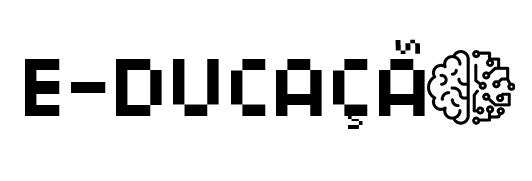
<style>
.page{position:relative;width:532px;height:181px;background:#ffffff}
.page>*{position:absolute;margin:0}
.t1{font:38.6px "04b03";color:#000000;scale:0.73 1}
.t2{font:91.3px "04b03";color:#000000}
.t3{font:28.9px "04b03";color:#000000}
</style>
<div class="page">
<p class="t1" style="left:395px;top:39px;width:25px;height:15px;rotate:-91deg">S</p>
<p class="t2" style="left:25px;top:59px;width:400px;height:57px">E-DUCACA</p>
<p class="t3" style="left:348px;top:111px;width:15px;height:18px">S</p>
</div>
